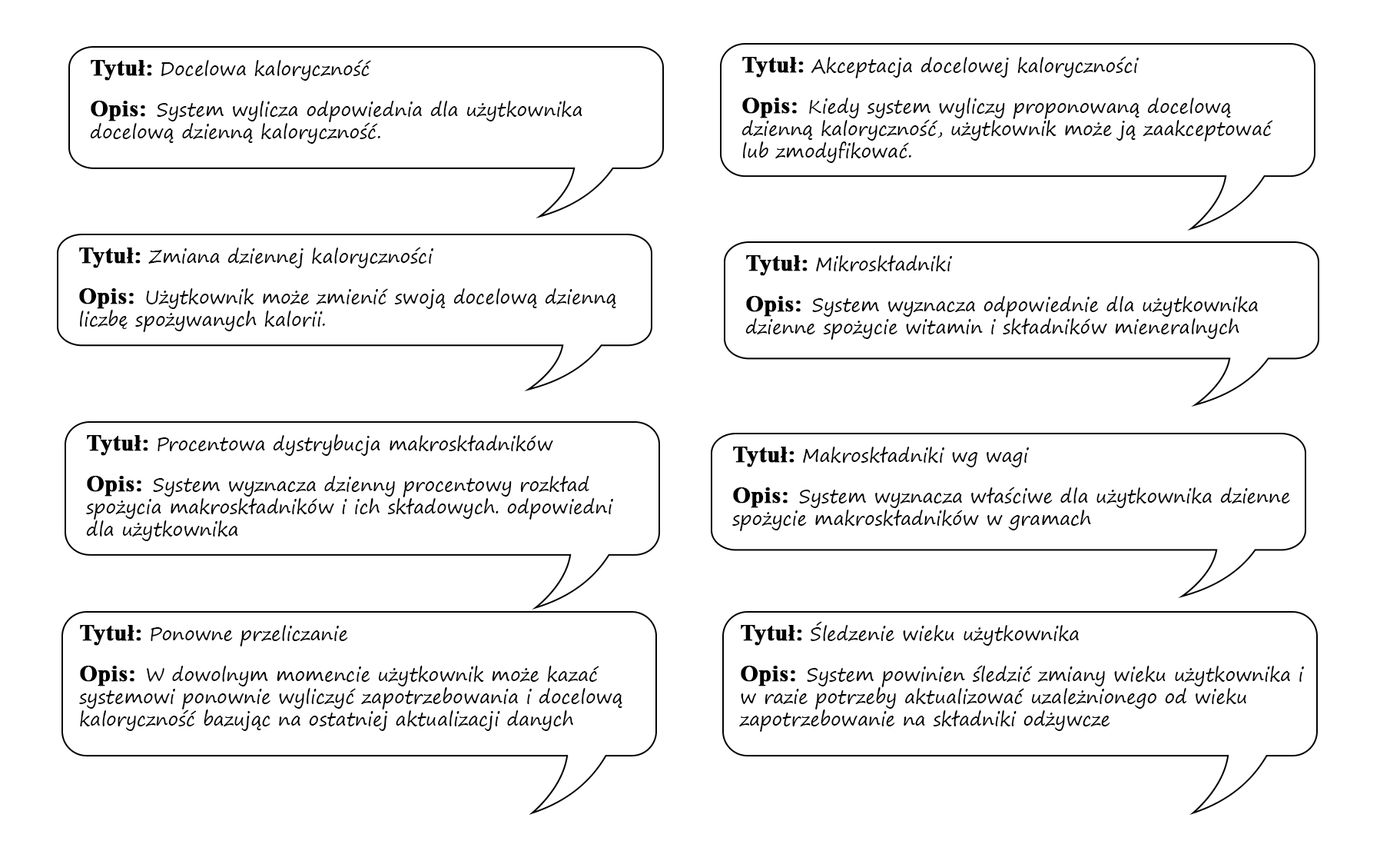
<style>
.page{position:relative;width:1380px;height:864px;background:#ffffff}
.page>*{position:absolute;margin:0}
.t1{font:18.4px "SegoePrint";color:#000000}
.t2{font:23.1px "TimesNewRomanPS-BoldMT";color:#000000;font-weight:bold}
</style>
<div class="page">
<p class="t1" style="left:90px;top:59px;width:493px;height:85px"><span class="t2">Tytuł: </span>Docelowa kaloryczność<br><br><span class="t2">Opis:  </span>System wylicza odpowiednia dla użytkownika docelową dzienną kaloryczność.</p>
<p class="t1" style="left:742px;top:56px;width:532px;height:107px"><span class="t2">Tytuł: </span>Akceptacja docelowej kaloryczności<br><br><span class="t2">Opis:  </span>Kiedy system wyliczy proponowaną docelową dzienną kaloryczność, użytkownik może ją zaakceptować lub zmodyfikować.</p>
<p class="t1" style="left:79px;top:247px;width:537px;height:85px"><span class="t2">Tytuł: </span>Zmiana dziennej kaloryczności<br><br><span class="t2">Opis:  </span>Użytkownik może zmienić swoją docelową dzienną liczbę spożywanych kalorii.</p>
<p class="t1" style="left:746px;top:255px;width:512px;height:85px"><span class="t2">Tytuł: </span>Mikroskładniki<br><br><span class="t2">Opis:  </span>System wyznacza odpowiednie dla użytkownika dzienne spożycie witamin i składników mieneralnych</p>
<p class="t1" style="left:86px;top:434px;width:527px;height:107px"><span class="t2">Tytuł: </span>Procentowa dystrybucja makroskładników<br><br><span class="t2">Opis:  </span>System wyznacza dzienny procentowy rozkład spożycia makroskładników i ich składowych. odpowiedni dla użytkownika</p>
<p class="t1" style="left:732px;top:447px;width:558px;height:84px"><span class="t2">Tytuł: </span>Makroskładniki wg wagi<br><br><span class="t2">Opis:  </span>System wyznacza właściwe dla użytkownika dzienne spożycie makroskładników w gramach</p>
<p class="t1" style="left:79px;top:625px;width:544px;height:106px"><span class="t2">Tytuł: </span>Ponowne przeliczanie<br><br><span class="t2">Opis:  </span>W dowolnym momencie użytkownik może kazać systemowi ponownie wyliczyć zapotrzebowania i docelową kaloryczność bazując na ostatniej aktualizacji danych</p>
<p class="t1" style="left:739px;top:621px;width:565px;height:111px"><span class="t2">Tytuł: </span>Śledzenie wieku użytkownika<br><br><span class="t2">Opis:  </span>System powinien śledzić zmiany wieku użytkownika i w razie potrzeby aktualizować uzależnionego od wieku zapotrzebowanie na składniki odżywcze</p>
</div>
